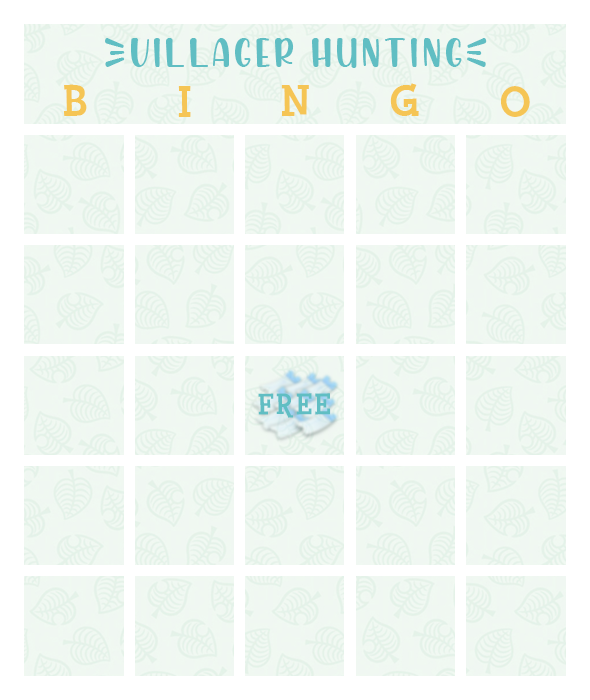
<style>
.page{position:relative;width:590px;height:700px;background:#ffffff}
.page>*{position:absolute;margin:0}
.t1{font:40px "ChickenQuiche";letter-spacing:0.08em;color:#60bec3}
.t2{font:45px "FinkHeavy";letter-spacing:0.08em;color:#f5c555}
.t3{font:30px "FinkHeavy";letter-spacing:0.08em;color:#60bec3}
</style>
<div class="page">
<p class="t1" style="left:105px;top:38px;width:382px;height:30px">{Villager HuntInG}</p>
<p class="t2" style="left:63px;top:84px;width:24px;height:32px">B</p>
<p class="t2" style="left:178px;top:86px;width:13px;height:31px">I</p>
<p class="t2" style="left:281px;top:85px;width:28px;height:31px">N</p>
<p class="t2" style="left:390px;top:83px;width:29px;height:33px">G</p>
<p class="t2" style="left:501px;top:86px;width:29px;height:31px">O</p>
<p class="t3" style="left:258px;top:393px;width:72px;height:25px">FREE</p>
</div>
